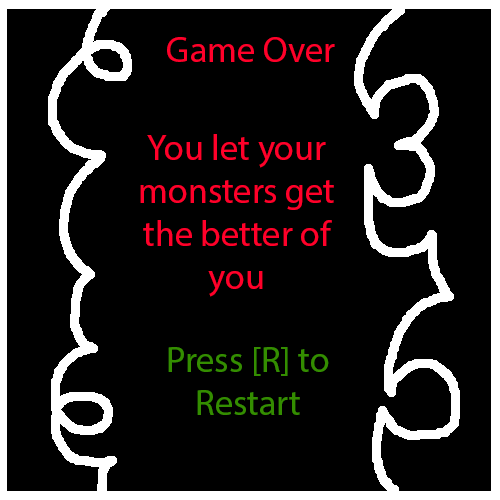
<style>
.page{position:relative;width:500px;height:500px;background:#000000}
.page>*{position:absolute;margin:0}
.t1{font:36px "MyriadPro-Regular";color:#ff002a}
.t2{font:36px "MyriadPro-Regular";color:#348d00}
</style>
<div class="page">
<p class="t1" style="left:167px;top:37px;width:168px;height:25px">Game Over</p>
<p class="t1" style="left:140px;top:134px;width:194px;height:163px;text-align:center">You let your monsters get the better of you</p>
<p class="t2" style="left:168px;top:347px;width:161px;height:68px;text-align:center">Press [R] to Restart</p>
</div>
